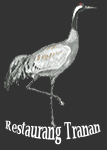
<style>
.page{position:relative;width:107px;height:150px;background:#333333}
.page>*{position:absolute;margin:0}
.t1{font:9.8px "LucidaBright-Demi";color:#ffffff}
</style>
<div class="page">
<p class="t1" style="left:5px;top:120px;width:96px;height:25px">Restaurang Tranan</p>
</div>
